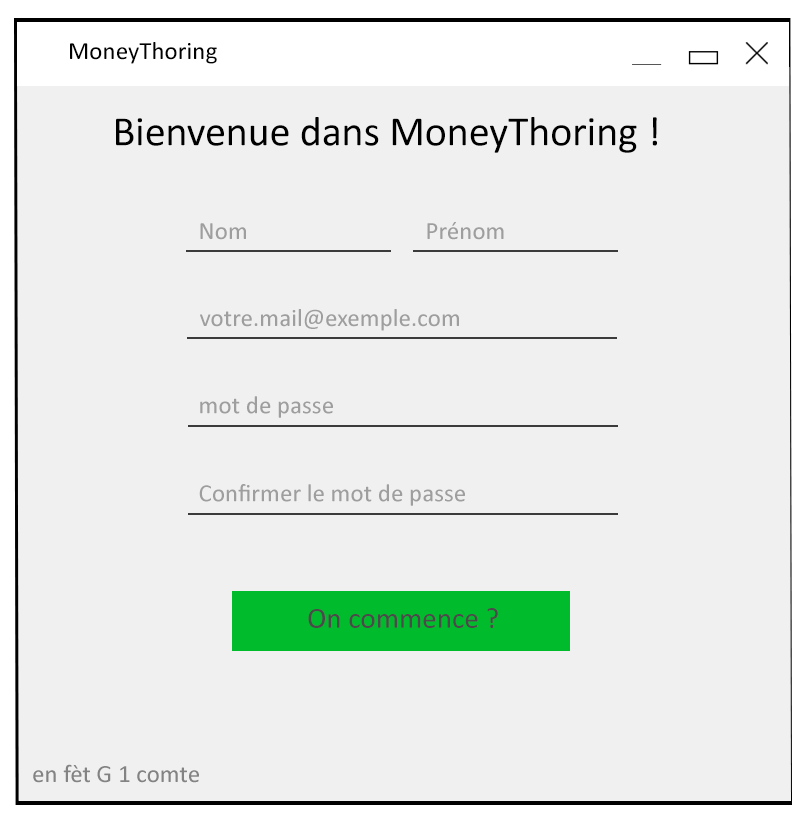
<style>
.page{position:relative;width:810px;height:825px;background:#f0f0f0}
.page>*{position:absolute;margin:0}
.t1{font:25px "Calibri";color:#010101}
.t2{font:41.7px "Calibri";color:#000000}
.t3{font:25px "Calibri";color:#9e9e9e}
.t4{font:29.2px "Calibri";color:#4a4a4a}
.t5{font:25px "Calibri";color:#838383}
</style>
<div class="page">
<p class="t1" style="left:70px;top:42px;width:147px;height:22px">MoneyThoring</p>
<p class="t2" style="left:116px;top:117px;width:541px;height:36px">Bienvenue dans MoneyThoring !</p>
<p class="t3" style="left:427px;top:222px;width:77px;height:18px">Prénom</p>
<p class="t3" style="left:200px;top:223px;width:46px;height:17px">Nom</p>
<p class="t3" style="left:200px;top:309px;width:259px;height:22px">votre.mail@exemple.com</p>
<p class="t3" style="left:200px;top:396px;width:133px;height:22px">mot de passe</p>
<p class="t3" style="left:199px;top:484px;width:266px;height:22px">Confirmer le mot de passe</p>
<p class="t4" style="left:308px;top:608px;width:190px;height:20px">On commence ?</p>
<p class="t5" style="left:33px;top:764px;width:166px;height:19px">en fèt G 1 comte</p>
</div>
